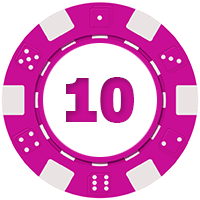
<style>
.page{position:relative;width:200px;height:200px;background:#ffffff}
.page>*{position:absolute;margin:0}
.t1{font:60px "VerdanaPro-CondBlack";color:#c80e94}
</style>
<div class="page">
<p class="t1" style="left:66px;top:77px;width:68px;height:46px">10</p>
</div>
